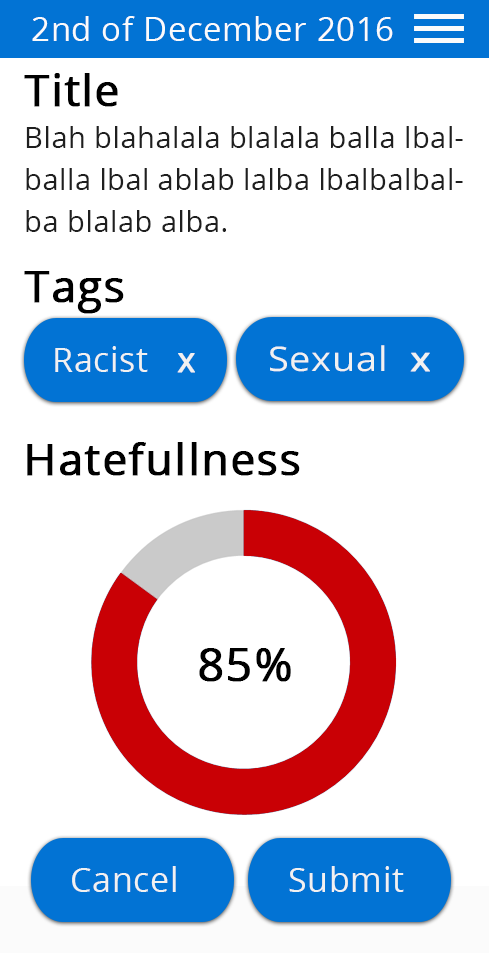
<style>
.page{position:relative;width:489px;height:953px;background:#ffffff}
.page>*{position:absolute;margin:0}
.t1{font:32.9px "OpenSans";letter-spacing:0.02em;color:#fbfbfb}
.t2{font:28.9px/42px "OpenSans";letter-spacing:0.02em;color:#1f1f1f}
.t3{font:43.9px/36px "OpenSans";letter-spacing:0.02em;color:#000000;font-weight:bold}
.t4{font:43.9px "OpenSans";letter-spacing:0.02em;color:#000000;font-weight:bold}
.t5{font:33.9px "OpenSans";letter-spacing:0.02em;color:#f1f1f1}
.t6{font:33.9px "OpenSans";letter-spacing:0.02em;color:#f1f1f1;font-weight:bold}
.t7{font:33.9px "OpenSans";letter-spacing:0.02em;color:#f1f1f1;scale:1.12 1}
.t8{font:33.9px "OpenSans";letter-spacing:0.02em;color:#f1f1f1;font-weight:bold;scale:1.12 1}
.t9{font:45.9px "OpenSans";letter-spacing:0.02em;color:#000000;font-weight:bold}
</style>
<div class="page">
<p class="t1" style="left:32px;top:16px;width:361px;height:25px">2nd of December 2016</p>
<p class="t2" style="left:24px;top:73px;width:439px;height:159px"><span class="t3">Title<br></span>Blah blahalala blalala balla lbalballa lbal ablab lalba lbalbalbalba blalab alba.</p>
<p class="t4" style="left:24px;top:271px;width:100px;height:43px">Tags</p>
<p class="t5" style="left:55px;top:346px;width:140px;height:27px">Racist   <span class="t6">x</span></p>
<p class="t7" style="left:270px;top:345px;width:160px;height:27px">Sexual  <span class="t8">x</span></p>
<p class="t4" style="left:27px;top:442px;width:273px;height:34px">Hatefullness</p>
<p class="t9" style="left:199px;top:648px;width:92px;height:34px">85%</p>
<p class="t5" style="left:72px;top:866px;width:104px;height:26px">Cancel</p>
<p class="t5" style="left:289px;top:866px;width:115px;height:26px">Submit</p>
</div>
